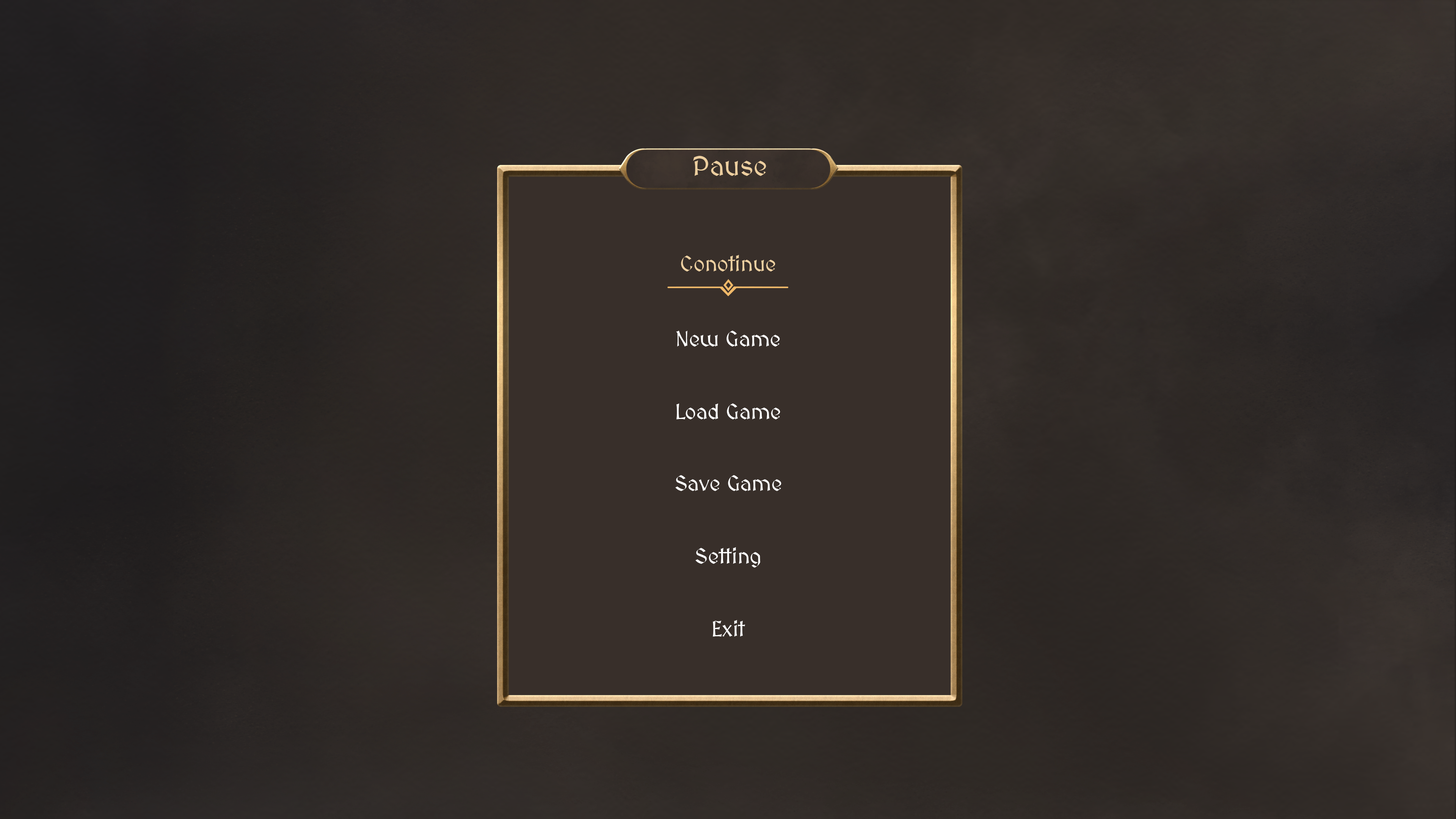
<style>
.page{position:relative;width:1456px;height:819px}
.page>*{position:absolute;margin:0}
.t1{font:27.3px "MedievalSharp";color:#ecce9f}
.t2{font:21.4px "MedievalSharp";color:#eed0a1}
.t3{font:21.4px "MedievalSharp";color:#ffffff}
</style>
<div class="page">
<p class="t1" style="left:693px;top:156px;width:73px;height:20px">Pause</p>
<p class="t2" style="left:681px;top:255px;width:94px;height:16px">Conotinue</p>
<p class="t3" style="left:676px;top:331px;width:104px;height:16px">New Game</p>
<p class="t3" style="left:676px;top:403px;width:104px;height:16px">Load Game</p>
<p class="t3" style="left:675px;top:475px;width:106px;height:16px">Save Game</p>
<p class="t3" style="left:695px;top:547px;width:65px;height:21px">Setting</p>
<p class="t3" style="left:713px;top:620px;width:32px;height:17px">Exit</p>
</div>
